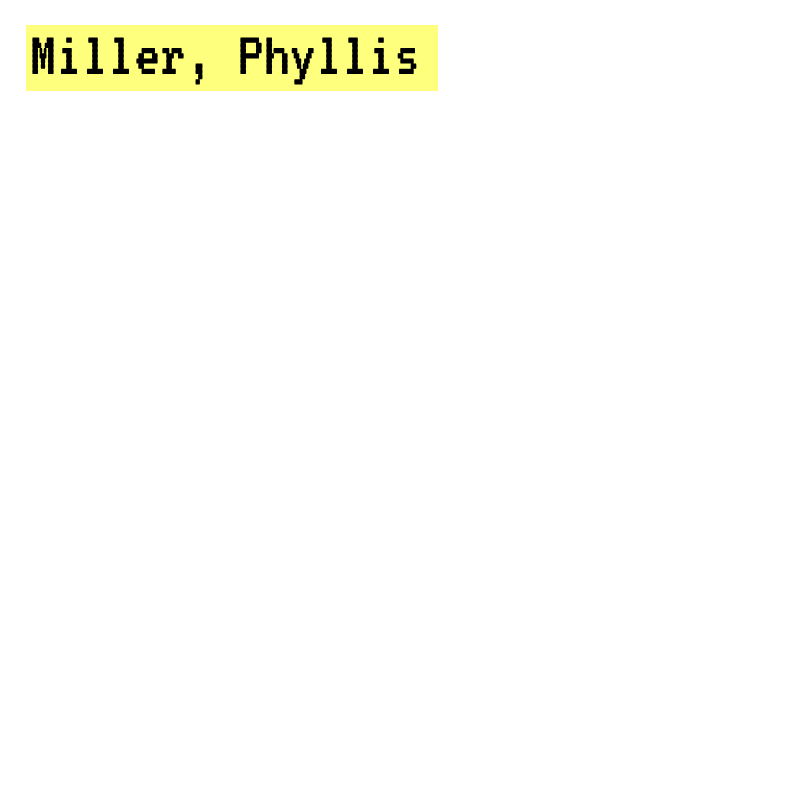
<style>
.page{position:relative;width:800px;height:800px;background:#ffffff}
.page>*{position:absolute;margin:0}
.t1{font:65px "VT323-Regular";color:#000000}
</style>
<div class="page">
<p class="t1" style="left:32px;top:37px;width:385px;height:48px">Miller, Phyllis</p>
</div>
